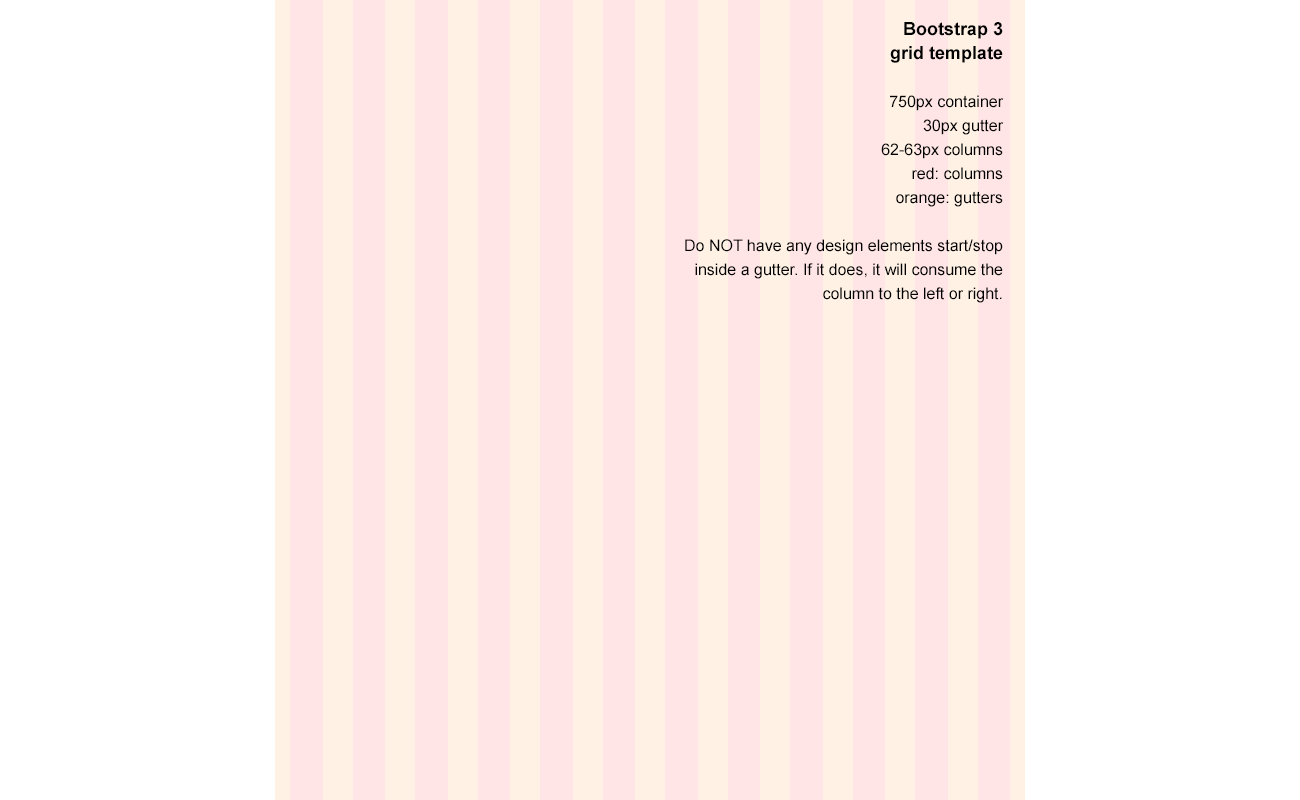
<style>
.page{position:relative;width:1300px;height:800px;background:#ffffff}
.page>*{position:absolute;margin:0}
.t1{font:16px/24px "ArialMT";color:#000000}
.t2{font:18px/24px "Arial-BoldMT";color:#000000}
</style>
<div class="page">
<p class="t1" style="left:685px;top:22px;width:319px;height:281px;text-align:right"><span class="t2">Bootstrap 3<br>grid template<br><br></span>750px container<br>30px gutter<br>62-63px columns<br>red: columns<br>orange: gutters<br><br>Do NOT have any design elements start/stop inside a gutter. If it does, it will consume the column to the left or right.</p>
</div>
